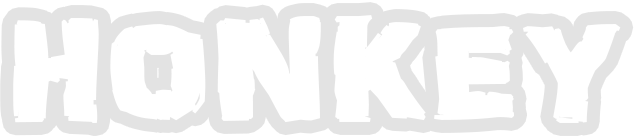
<style>
.page{position:relative;width:634px;height:138px;background:#ffffff}
.page>*{position:absolute;margin:0}
.t1{font:140px "ARDARLING";color:#ffffff;font-weight:bold}
</style>
<div class="page">
<p class="t1" style="left:13px;top:15px;width:608px;height:108px">HONKEY</p>
</div>
